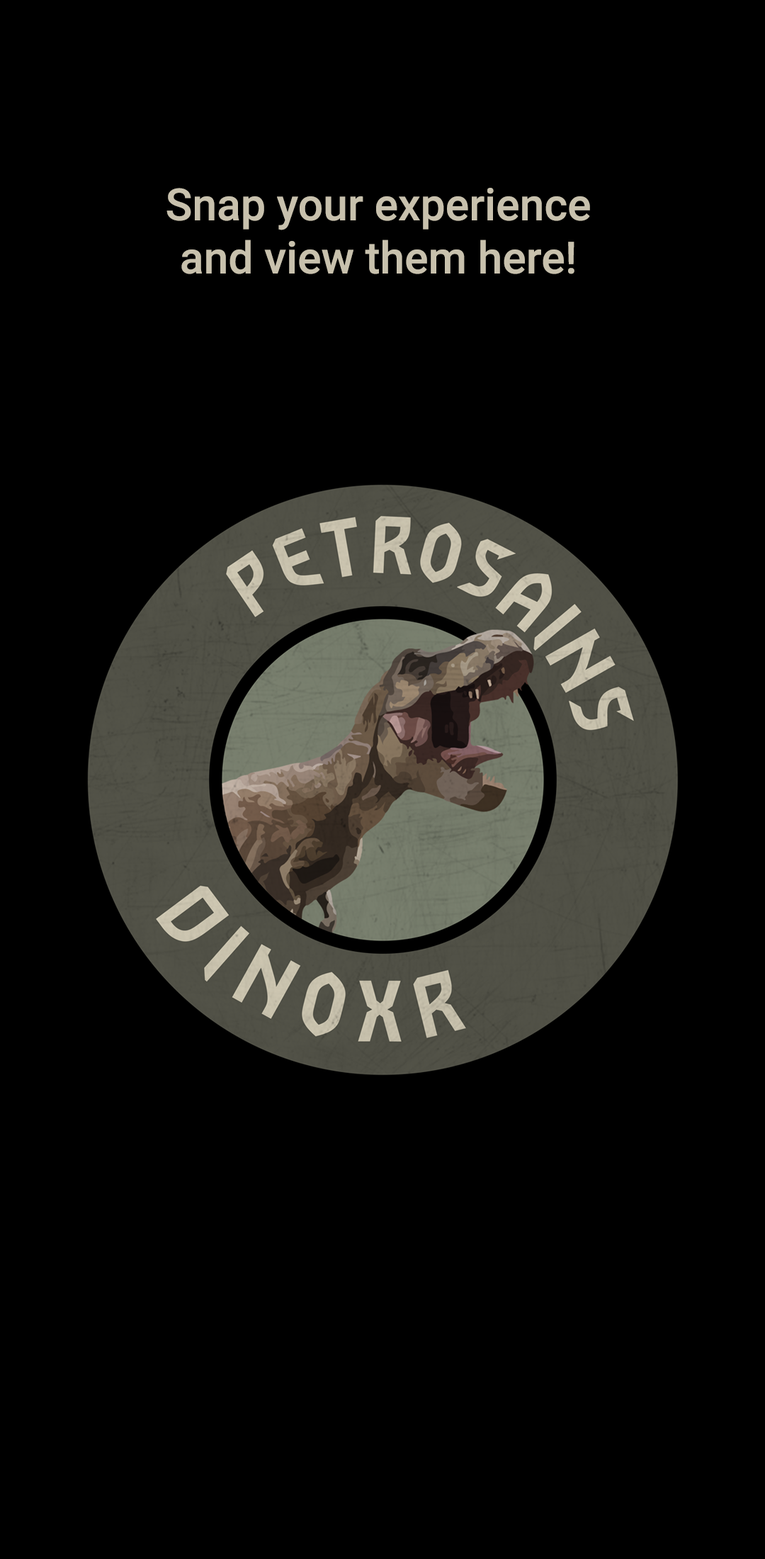
<style>
.page{position:relative;width:765px;height:1559px;background:#000000}
.page>*{position:absolute;margin:0}
.t1{font:44.3px "Roboto-Medium";color:#c8c1ad}
</style>
<div class="page">
<p class="t1" style="left:166px;top:188px;width:424px;height:86px;text-align:center">Snap your experience and view them here!</p>
</div>
